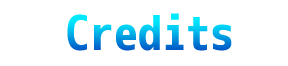
<style>
.page{position:relative;width:288px;height:66px;background:#ffffff}
.page>*{position:absolute;margin:0}
.t1{font:48px "mplus-1m-bold"}
</style>
<div class="page">
<p class="t1" style="left:67px;top:13px;width:165px;height:38px">Credits</p>
</div>
